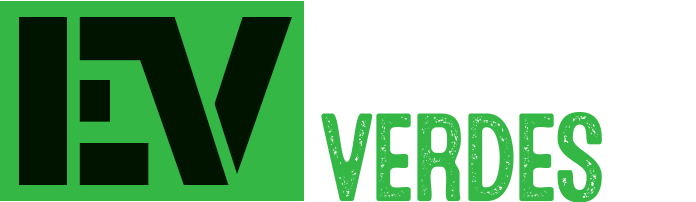
<style>
.page{position:relative;width:696px;height:202px;background:#ffffff}
.page>*{position:absolute;margin:0}
.t1{font:240px "BrocadesSans";letter-spacing:-0.18em;color:#001400}
.t2{font:125px "MicrobrewSoftThree";letter-spacing:-0.069em;color:#34b745}
</style>
<div class="page">
<p class="t1" style="left:19px;top:17px;width:273px;height:168px">EV</p>
<p class="t2" style="left:321px;top:112px;width:281px;height:91px">VERDES</p>
</div>
